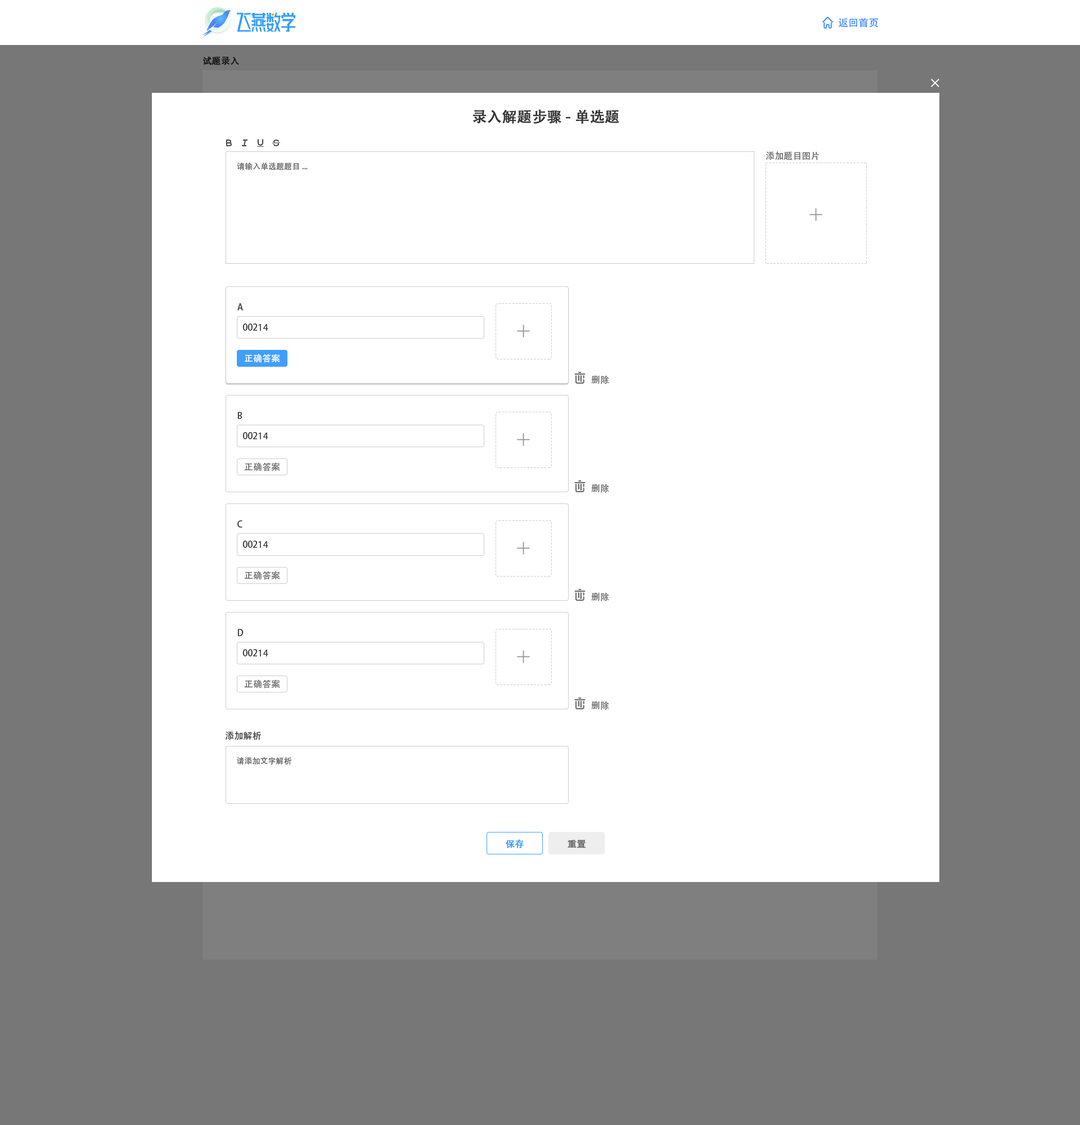
<style>
.page{position:relative;width:1080px;height:1125px;background:#ffffff}
.page>*{position:absolute;margin:0}
.t1{font:10.1px "AdobeHeitiStd-Regular";color:#408eff}
.t2{font:9px "AdobeHeitiStd-Regular";color:#191919;font-weight:bold}
.t3{font:14.6px "AdobeHeitiStd-Regular";color:#333333;font-weight:bold}
.t4{font:9px "AdobeHeitiStd-Regular";color:#666666}
.t5{font:7.9px "AdobeHeitiStd-Regular";color:#666666}
.t6{font:9px "AdobeHeitiStd-Regular";color:#333333}
.t7{font:9px "AdobeHeitiStd-Regular";color:#ffffff}
.t8{font:9px "AdobeHeitiStd-Regular";color:#409eff;font-weight:bold}
.t9{font:9px "AdobeHeitiStd-Regular";color:#666666;font-weight:bold}
</style>
<div class="page">
<p class="t1" style="left:838px;top:17px;width:41px;height:11px">返回首页</p>
<p class="t2" style="left:202px;top:56px;width:37px;height:9px">试题录入</p>
<p class="t3" style="left:472px;top:109px;width:147px;height:15px">录入解题步骤-单选题</p>
<p class="t4" style="left:766px;top:151px;width:53px;height:9px">添加题目图片</p>
<p class="t5" style="left:237px;top:162px;width:71px;height:8px">请输入单选题题目...</p>
<p class="t6" style="left:237px;top:303px;width:6px;height:7px">A</p>
<p class="t6" style="left:242px;top:323px;width:26px;height:8px">00214</p>
<p class="t7" style="left:245px;top:354px;width:35px;height:9px">正确答案</p>
<p class="t4" style="left:591px;top:375px;width:18px;height:9px">删除</p>
<p class="t6" style="left:237px;top:412px;width:5px;height:7px">B</p>
<p class="t6" style="left:242px;top:432px;width:26px;height:7px">00214</p>
<p class="t4" style="left:245px;top:462px;width:35px;height:9px">正确答案</p>
<p class="t4" style="left:591px;top:484px;width:18px;height:9px">删除</p>
<p class="t6" style="left:237px;top:520px;width:5px;height:8px">C</p>
<p class="t6" style="left:242px;top:541px;width:26px;height:7px">00214</p>
<p class="t4" style="left:245px;top:571px;width:35px;height:9px">正确答案</p>
<p class="t4" style="left:591px;top:592px;width:18px;height:9px">删除</p>
<p class="t6" style="left:237px;top:629px;width:7px;height:7px">D</p>
<p class="t6" style="left:242px;top:649px;width:26px;height:7px">00214</p>
<p class="t4" style="left:245px;top:680px;width:35px;height:8px">正确答案</p>
<p class="t4" style="left:591px;top:701px;width:18px;height:9px">删除</p>
<p class="t6" style="left:226px;top:731px;width:35px;height:9px">添加解析</p>
<p class="t5" style="left:237px;top:757px;width:55px;height:8px">请添加文字解析</p>
<p class="t8" style="left:506px;top:839px;width:18px;height:9px">保存</p>
<p class="t9" style="left:568px;top:840px;width:18px;height:8px">重置</p>
</div>
